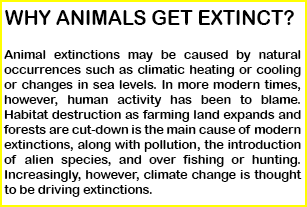
<style>
.page{position:relative;width:307px;height:207px;background:#ffffff}
.page>*{position:absolute;margin:0}
.t1{font:20.8px "ArialRoundedMTBold";color:#020202;scale:0.95 1}
.t2{font:12.5px "ArialRoundedMTBold";color:#020202}
</style>
<div class="page">
<p class="t1" style="left:5px;top:10px;width:289px;height:15px">WHY ANIMALS GET EXTINCT?</p>
<p class="t2" style="left:3px;top:50px;width:299px;height:147px;text-align:justify">Animal extinctions may be caused by natural occurrences such as climatic heating or cooling or changes in sea levels. In more modern times, however, human activity has been to blame. Habitat destruction as farming land expands and forests are cut-down is the main cause of modern extinctions, along with pollution, the introduction of alien species, and over fishing or hunting. Increasingly, however, climate change is thought to be driving extinctions.</p>
</div>
